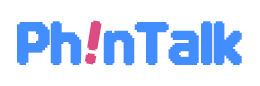
<style>
.page{position:relative;width:260px;height:86px;background:#ffffff}
.page>*{position:absolute;margin:0}
.t1{font:48px "DNFBitBitv2";letter-spacing:-0.05em;color:#428dff}
.t2{font:48px "DNFBitBitv2";letter-spacing:-0.05em;color:#dc4c82}
</style>
<div class="page">
<p class="t1" style="left:17px;top:21px;width:225px;height:45px">Ph  nTalk</p>
<p class="t2" style="left:84px;top:20px;width:18px;height:45px;rotate:9deg">!</p>
</div>
